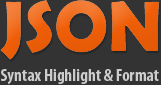
<style>
.page{position:relative;width:161px;height:85px;background:#333333}
.page>*{position:absolute;margin:0}
.t1{font:17.2px "MyriadPro-BoldCond";color:#cccccc}
</style>
<div class="page">
<p class="t1" style="left:1px;top:69px;width:158px;height:16px">Syntax Highlight &amp; Format</p>
</div>
